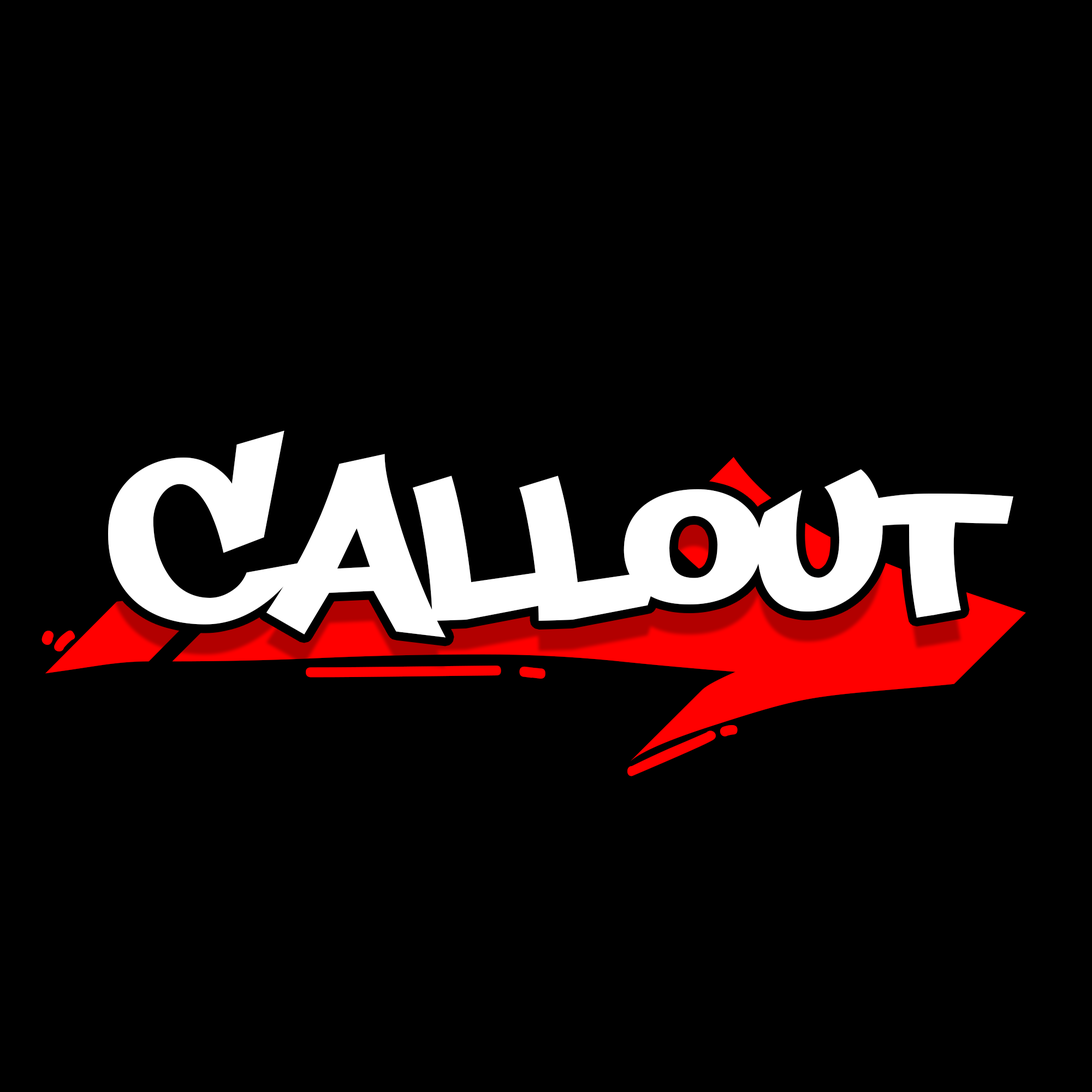
<style>
.page{position:relative;width:1092px;height:1092px;background:#000000}
.page>*{position:absolute;margin:0}
.t1{font:282.1px "PhillySans-Regular";color:#ffffff}
.t2{font:744.7px "MARSNEVENEKSK-Regular"}
</style>
<div class="page">
<p class="t1" style="left:108px;top:430px;width:905px;height:208px">Callout</p>
<p class="t2" style="left:41px;top:457px;width:985px;height:319px">&gt;</p>
</div>
